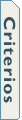
<style>
.page{position:relative;width:22px;height:120px;background:#f0f0e8}
.page>*{position:absolute;margin:0}
.t1{font:16px "GillSansMT-Bold";letter-spacing:0.06em;color:#35535e;scale:1.17 1}
</style>
<div class="page">
<p class="t1" style="left:3px;top:17px;width:13px;height:86px;rotate:90deg">Criterios</p>
</div>
